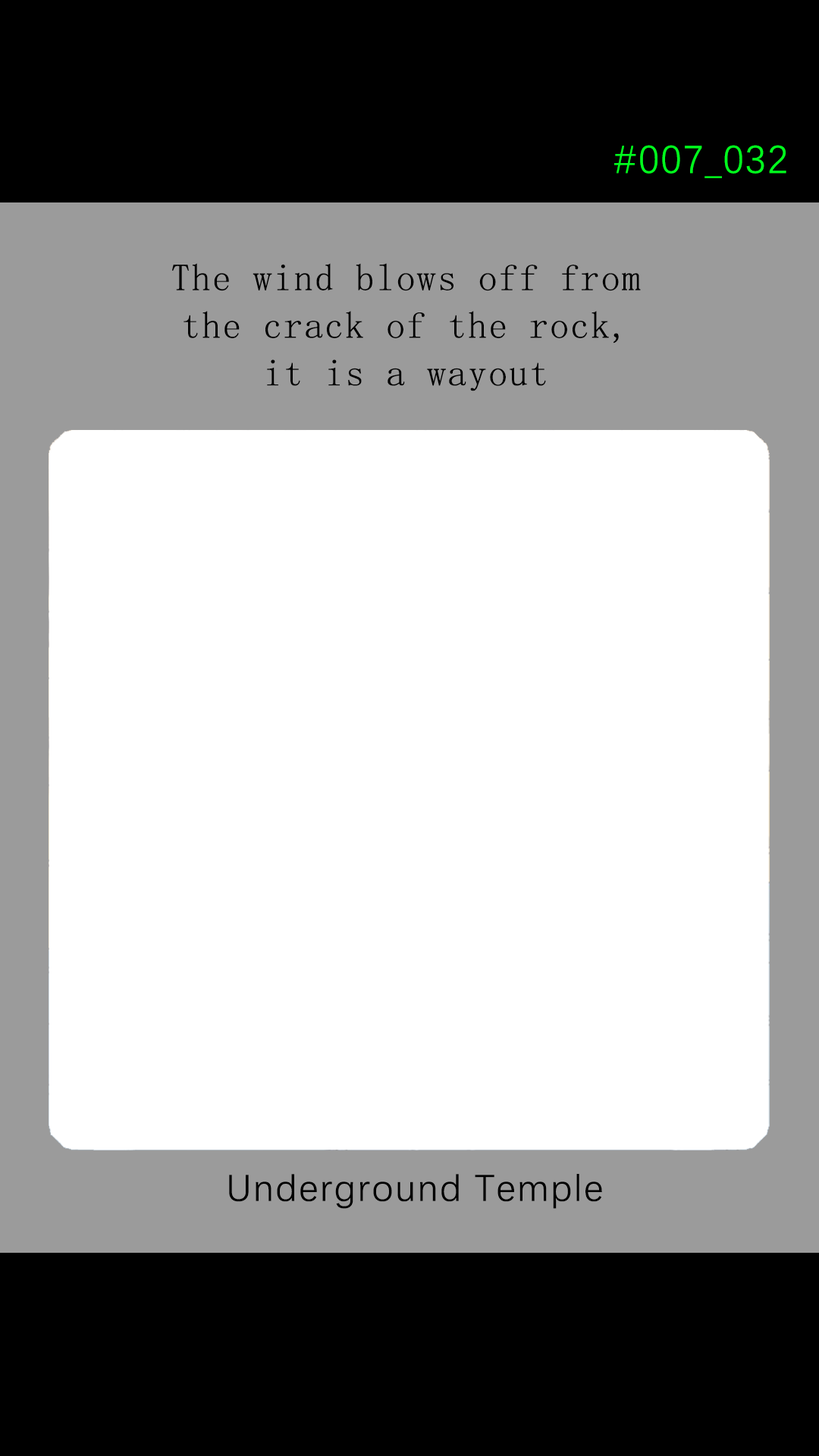
<style>
.page{position:relative;width:819px;height:1456px;background:#ffffff}
.page>*{position:absolute;margin:0}
.t1{font:39.2px "DengXian-Regular";letter-spacing:0.04em;color:#00ff1e}
.t2{font:37.9px/47.6px "SimSun";letter-spacing:0.04em;color:#000000}
.t3{font:37.9px "DengXian-Regular";letter-spacing:0.04em;color:#000000}
</style>
<div class="page">
<p class="t1" style="left:614px;top:145px;width:172px;height:33px">#007_032</p>
<p class="t2" style="left:172px;top:263px;width:469px;height:128px;text-align:center">The wind blows off from <br>the crack of the rock, <br>it is a wayout</p>
<p class="t3" style="left:229px;top:1174px;width:373px;height:35px">Underground Temple</p>
</div>
